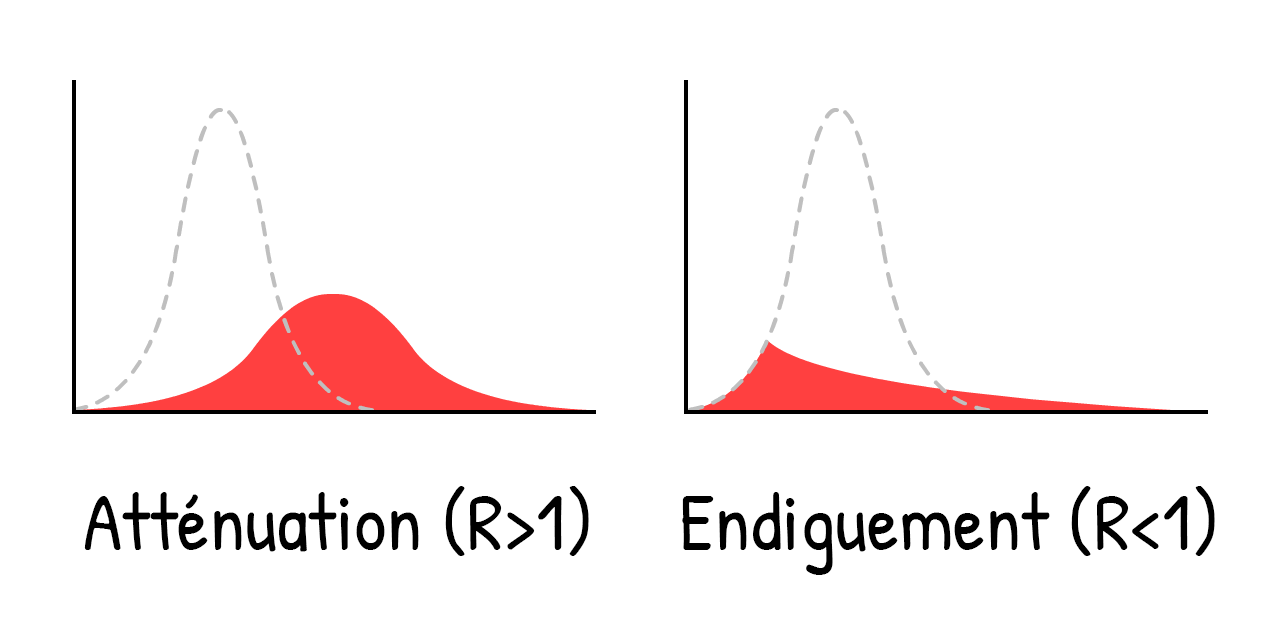
<style>
.page{position:relative;width:1280px;height:640px;background:#ffffff}
.page>*{position:absolute;margin:0}
.t1{font:80px "PatrickHand-Regular";color:#000000}
</style>
<div class="page">
<p class="t1" style="left:84px;top:486px;width:505px;height:70px">Atténuation (R&gt;1)</p>
<p class="t1" style="left:682px;top:486px;width:533px;height:89px">Endiguement (R&lt;1)</p>
</div>
